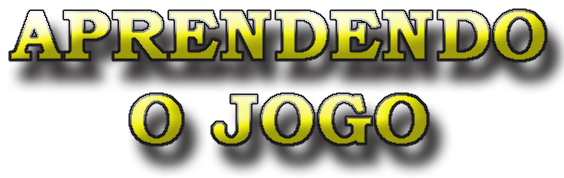
<style>
.page{position:relative;width:564px;height:178px;background:#ffffff}
.page>*{position:absolute;margin:0}
.t1{font:70px "BookmanOldStyle-Bold";font-weight:bold}
</style>
<div class="page">
<p class="t1" style="left:10px;top:10px;width:536px;height:135px;text-align:center">APRENDENDO<br>O JOGO</p>
</div>
